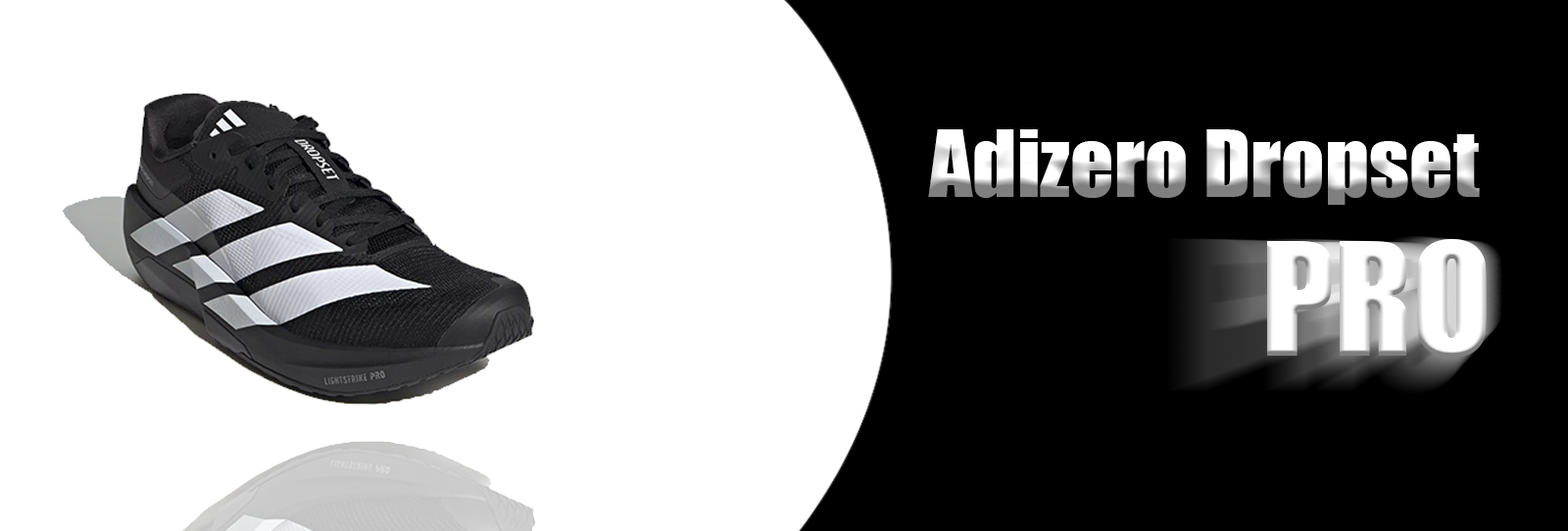
<style>
.page{position:relative;width:1568px;height:531px;background:#ffffff}
.page>*{position:absolute;margin:0}
.t1{font:85.5px "Impact"}
.t2{font:145.2px "Impact";color:#ffffff}
</style>
<div class="page">
<p class="t1" style="left:928px;top:129px;width:552px;height:76px">Adizero Dropset</p>
<p class="t2" style="left:1267px;top:239px;width:220px;height:119px">PRO</p>
</div>
